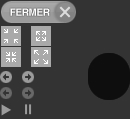
<style>
.page{position:relative;width:130px;height:119px;background:#333333}
.page>*{position:absolute;margin:0}
.t1{font:10px "Helvetica-Bold";letter-spacing:-0.04em;color:#ffffff}
</style>
<div class="page">
<p class="t1" style="left:10px;top:8px;width:40px;height:8px">FERMER</p>
</div>
